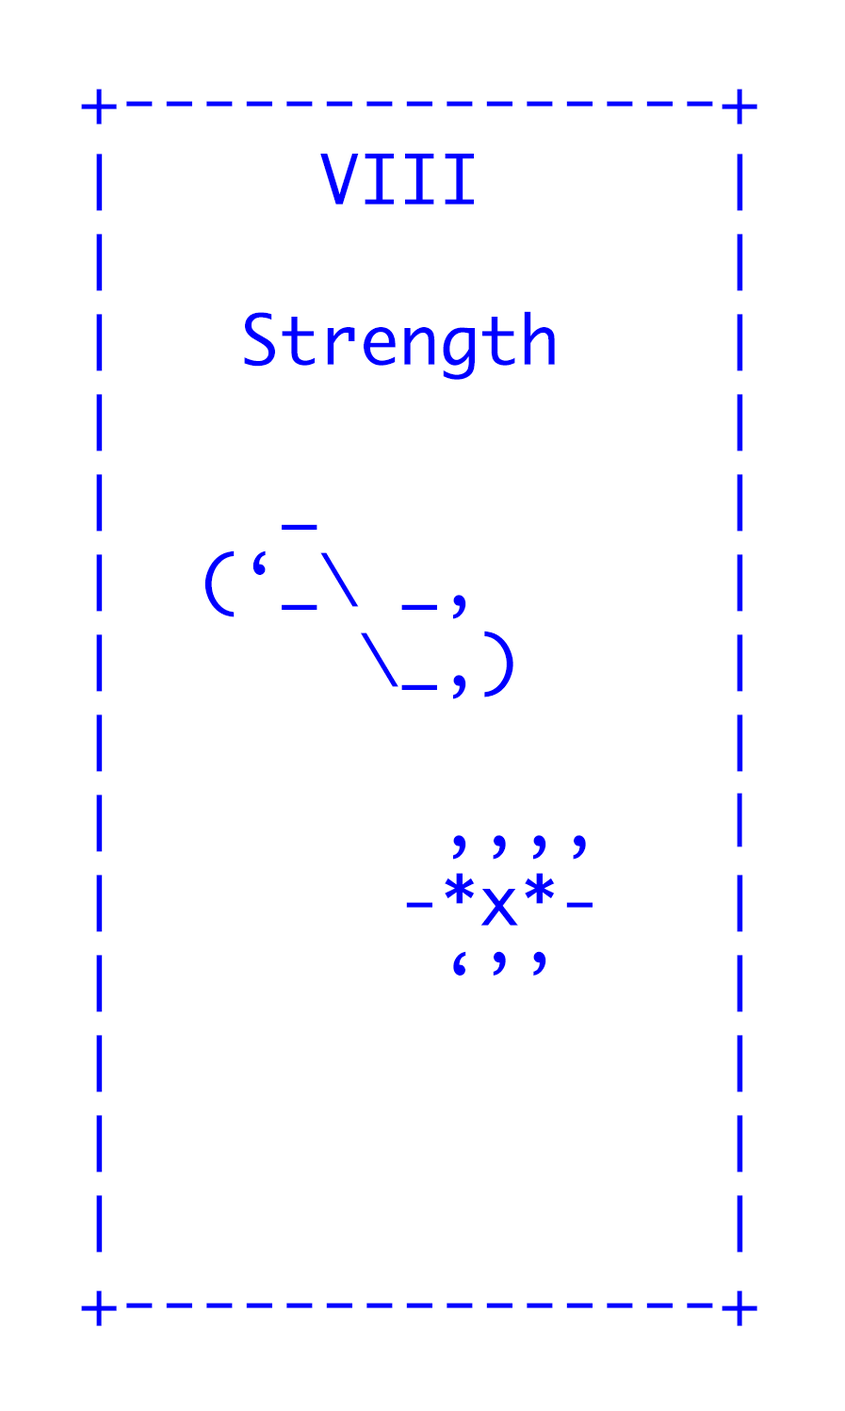
<style>
.page{position:relative;width:845px;height:1411px;background:#ffffff}
.page>*{position:absolute;margin:0}
.t1{font:66.7px "Monaco";color:#0000ff}
</style>
<div class="page">
<p class="t1" style="left:81px;top:89px;width:677px;height:1237px">+---------------+<br>│     VIII      │<br>│               │<br>│   Strength    │<br>│               │<br>│    _          │ <br>│  (‘_\ _,      │ <br>│      \_,)     │ <br>│               │  <br>│        ,,,,   | <br>│       -*x*-   │<br>│        ‘’’    │<br>│               │<br>│               │<br>│               │<br>+---------------+</p>
</div>
